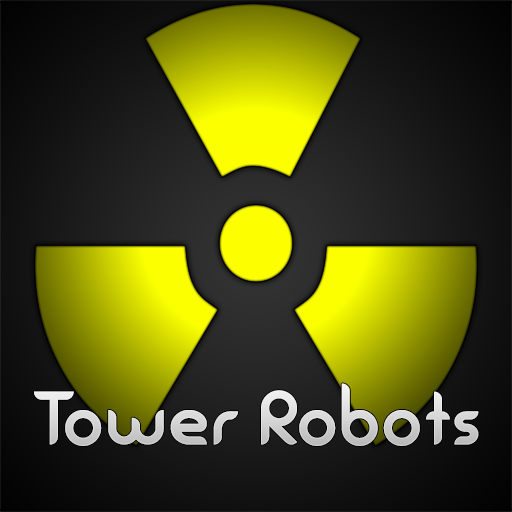
<style>
.page{position:relative;width:512px;height:512px}
.page>*{position:absolute;margin:0}
.t1{font:81.9px "Urba-Regular";color:#d4d4d4}
</style>
<div class="page">
<p class="t1" style="left:34px;top:383px;width:445px;height:63px">Tower Robots</p>
</div>
